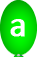
<style>
.page{position:relative;width:37px;height:57px;background:#ffffff}
.page>*{position:absolute;margin:0}
.t1{font:36px "Calibri";color:#ffffff;font-weight:bold}
</style>
<div class="page">
<p class="t1" style="left:10px;top:19px;width:15px;height:18px">a</p>
</div>
